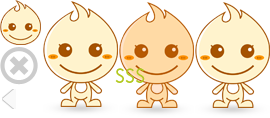
<style>
.page{position:relative;width:270px;height:118px;background:#ffffff}
.page>*{position:absolute;margin:0}
.t1{font:26px "STHeitiSC-Light";color:#b3c920}
</style>
<div class="page">
<p class="t1" style="left:115px;top:68px;width:30px;height:15px">sss</p>
</div>
